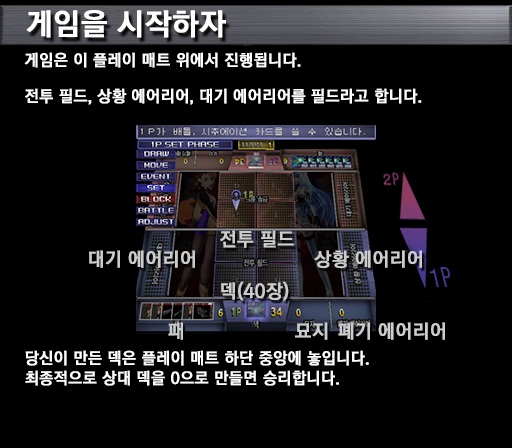
<style>
.page{position:relative;width:512px;height:448px;background:#000000}
.page>*{position:absolute;margin:0}
.t1{font:30px "KoreanGD15-R";color:#ffffff;font-weight:bold}
.t2{font:16px/18px "KoreanGD15-R";color:#ffffff;font-weight:bold}
.t3{font:19px "KoreanGD15-R";color:#cccccc;font-weight:bold}
.t4{font:16px "KoreanGD15-R";color:#ffffff;font-weight:bold}
.t5{font:16px/20px "KoreanGD15-R";color:#ffffff;font-weight:bold}
</style>
<div class="page">
<p class="t1" style="left:26px;top:10px;width:200px;height:28px">게임을 시작하자</p>
<p class="t2" style="left:24px;top:52px;width:398px;height:53px">게임은 이 플레이 매트 위에서 진행됩니다.<br><br>전투 필드, 상황 에어리어, 대기 에어리어를 필드라고 합니다.</p>
<p class="t3" style="left:220px;top:230px;width:74px;height:18px">전투 필드<br><span class="t4"></span></p>
<p class="t3" style="left:89px;top:250px;width:106px;height:18px">대기 에어리어<br><span class="t4"></span></p>
<p class="t3" style="left:314px;top:250px;width:108px;height:18px">상황 에어리어<br><span class="t4"></span></p>
<p class="t3" style="left:221px;top:281px;width:68px;height:20px">덱(40장)<br><span class="t4"></span></p>
<p class="t3" style="left:168px;top:322px;width:15px;height:18px">패<br><span class="t4"></span></p>
<p class="t3" style="left:295px;top:322px;width:33px;height:18px">묘지<br><span class="t4"></span></p>
<p class="t3" style="left:338px;top:322px;width:107px;height:18px">폐기 에어리어<br><span class="t4"></span></p>
<p class="t5" style="left:25px;top:350px;width:344px;height:36px">당신이 만든 덱은 플레이 매트 하단 중앙에 놓입니다.<br>최종적으로 상대 덱을 0으로 만들면 승리합니다.<br><span class="t2"></span></p>
</div>
